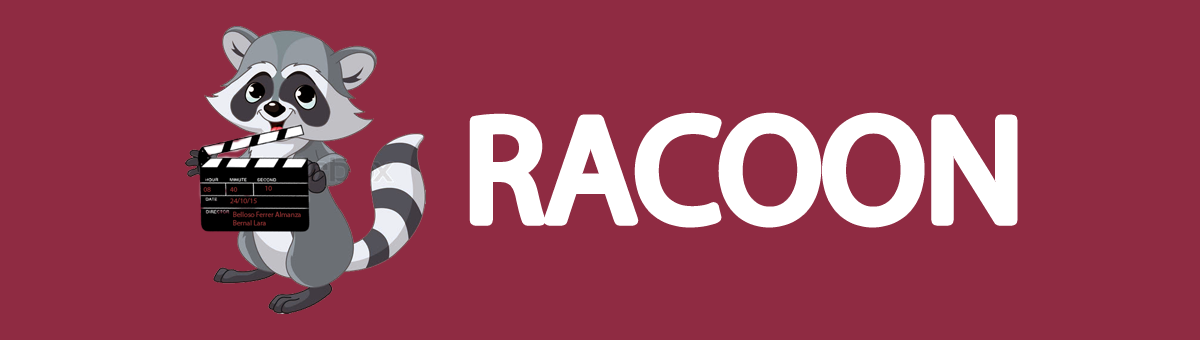
<style>
.page{position:relative;width:1200px;height:340px;background:#8f2b42}
.page>*{position:absolute;margin:0}
.t1{font:150px "MyriadPro-Regular";color:#ffffff}
</style>
<div class="page">
<p class="t1" style="left:474px;top:117px;width:539px;height:106px">RACOON</p>
</div>
